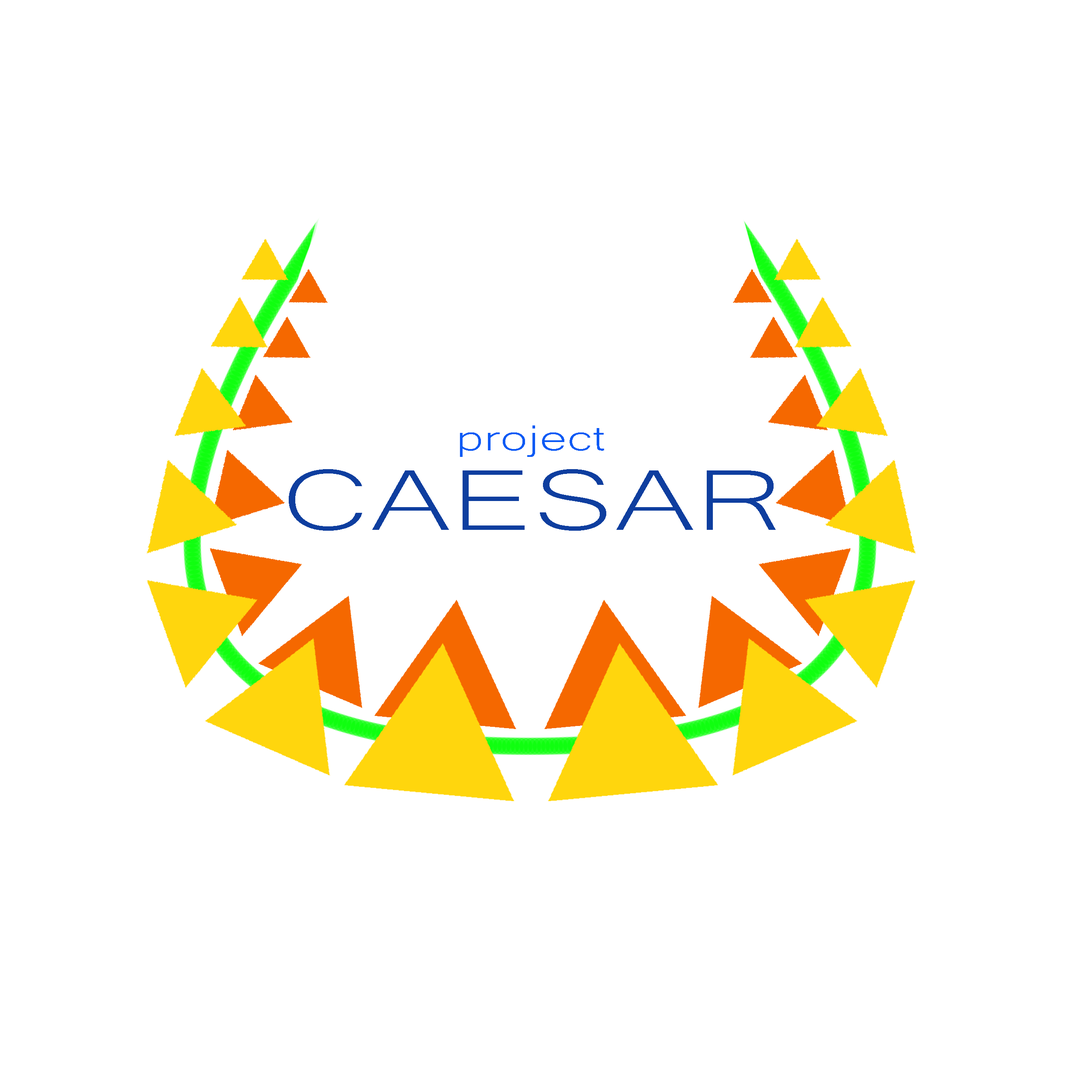
<style>
.page{position:relative;width:1092px;height:1092px;background:#ffffff}
.page>*{position:absolute;margin:0}
.t1{font:46.1px "Microsoft-Yi-Baiti";color:#0c5af5;scale:1.44 1}
.t2{font:111.5px "Microsoft-Yi-Baiti";color:#0e3e9f;scale:1.44 1}
</style>
<div class="page">
<p class="t1" style="left:460px;top:425px;width:144px;height:32px">project</p>
<p class="t2" style="left:289px;top:469px;width:487px;height:62px">CAESAR</p>
</div>
